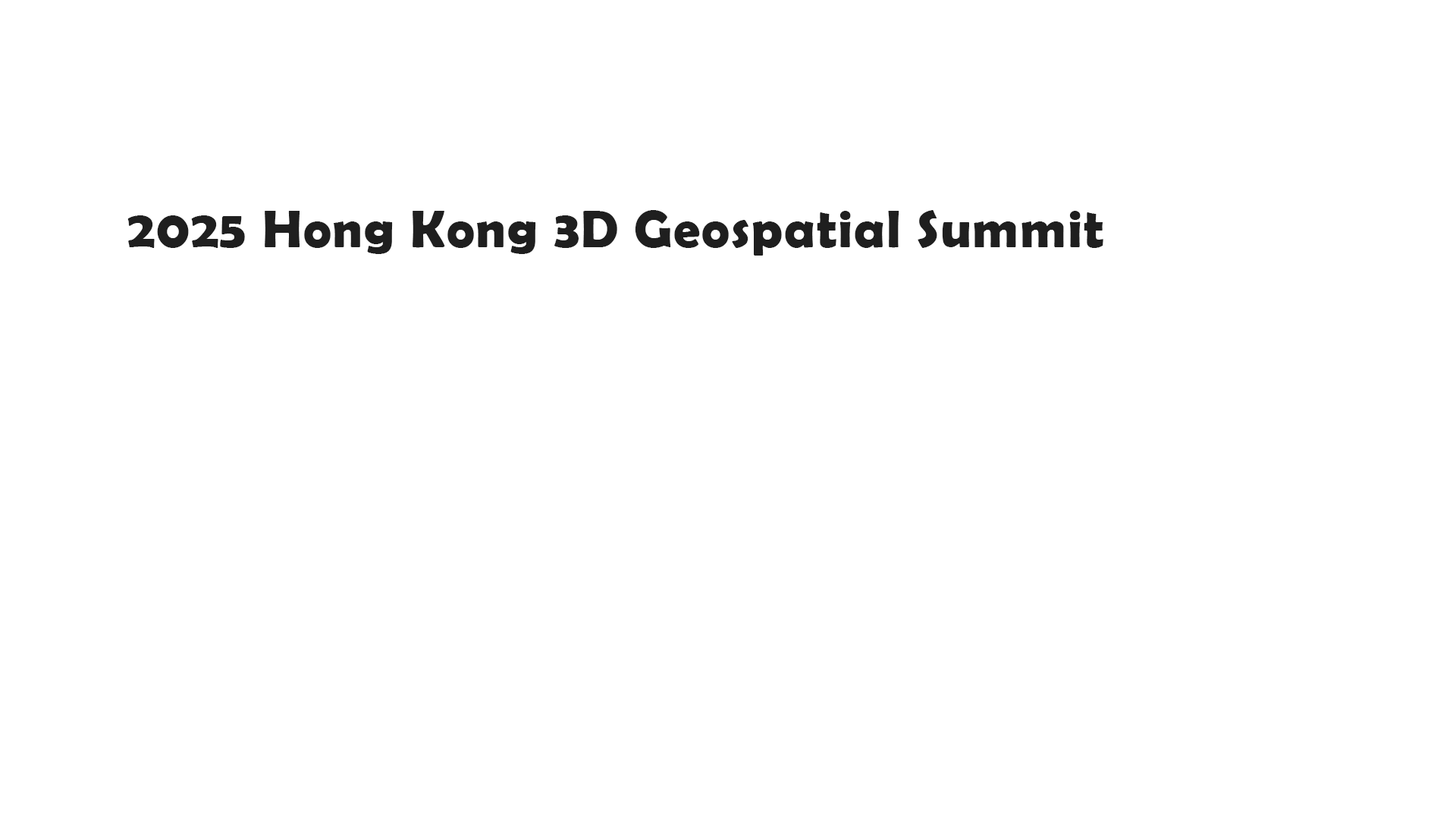
<style>
.page{position:relative;width:1456px;height:819px;background:#ffffff}
.page>*{position:absolute;margin:0}
.t1{font:53.1px "BerlinSansFBDemi-Bold";letter-spacing:0.025em;color:#1f1f1f}
</style>
<div class="page">
<p class="t1" style="left:127px;top:210px;width:976px;height:46px">2025 Hong Kong 3D Geospatial Summit</p>
</div>
